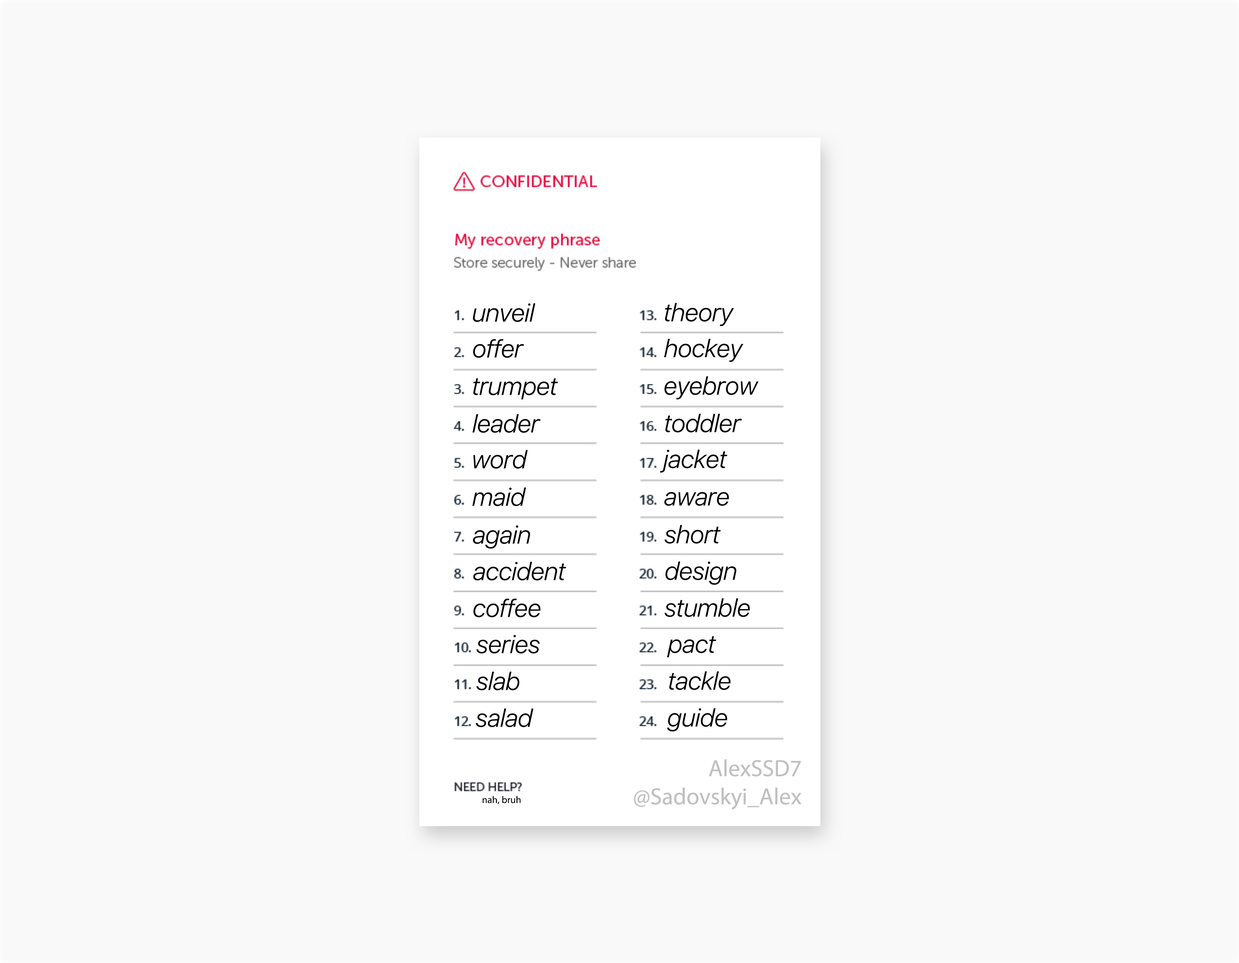
<style>
.page{position:relative;width:1239px;height:963px;background:#f9f9f9}
.page>*{position:absolute;margin:0}
.t1{font:26.1px "SFProDisplay-LightItalic";color:#000000}
.t2{font:23.5px "MyriadPro-Regular";color:#c0c0c0}
.t3{font:9.8px "MyriadPro-Regular";color:#000000}
</style>
<div class="page">
<p class="t1" style="left:473px;top:303px;width:62px;height:19px">unveil</p>
<p class="t1" style="left:665px;top:303px;width:69px;height:23px">theory</p>
<p class="t1" style="left:473px;top:339px;width:51px;height:19px">offer</p>
<p class="t1" style="left:664px;top:339px;width:79px;height:23px">hockey</p>
<p class="t1" style="left:664px;top:376px;width:94px;height:24px">eyebrow</p>
<p class="t1" style="left:473px;top:378px;width:85px;height:22px">trumpet</p>
<p class="t1" style="left:472px;top:414px;width:68px;height:19px">leader</p>
<p class="t1" style="left:665px;top:414px;width:77px;height:19px">toddler</p>
<p class="t1" style="left:473px;top:450px;width:55px;height:19px">word</p>
<p class="t1" style="left:660px;top:449px;width:67px;height:24px">jacket</p>
<p class="t1" style="left:472px;top:487px;width:54px;height:19px">maid</p>
<p class="t1" style="left:664px;top:492px;width:65px;height:14px">aware</p>
<p class="t1" style="left:473px;top:525px;width:57px;height:24px">again</p>
<p class="t1" style="left:664px;top:525px;width:57px;height:19px">short</p>
<p class="t1" style="left:473px;top:562px;width:93px;height:18px">accident</p>
<p class="t1" style="left:665px;top:561px;width:71px;height:24px">design</p>
<p class="t1" style="left:473px;top:598px;width:67px;height:19px">coffee</p>
<p class="t1" style="left:664px;top:598px;width:86px;height:19px">stumble</p>
<p class="t1" style="left:476px;top:635px;width:64px;height:18px">series</p>
<p class="t1" style="left:667px;top:636px;width:49px;height:21px">pact</p>
<p class="t1" style="left:476px;top:671px;width:43px;height:19px">slab</p>
<p class="t1" style="left:669px;top:671px;width:61px;height:19px">tackle</p>
<p class="t1" style="left:476px;top:708px;width:57px;height:19px">salad</p>
<p class="t1" style="left:667px;top:708px;width:60px;height:23px">guide</p>
<p class="t2" style="left:634px;top:759px;width:167px;height:51px;text-align:right">AlexSSD7<br>@Sadovskyi_Alex</p>
<p class="t3" style="left:482px;top:796px;width:39px;height:8px">nah, bruh</p>
</div>
